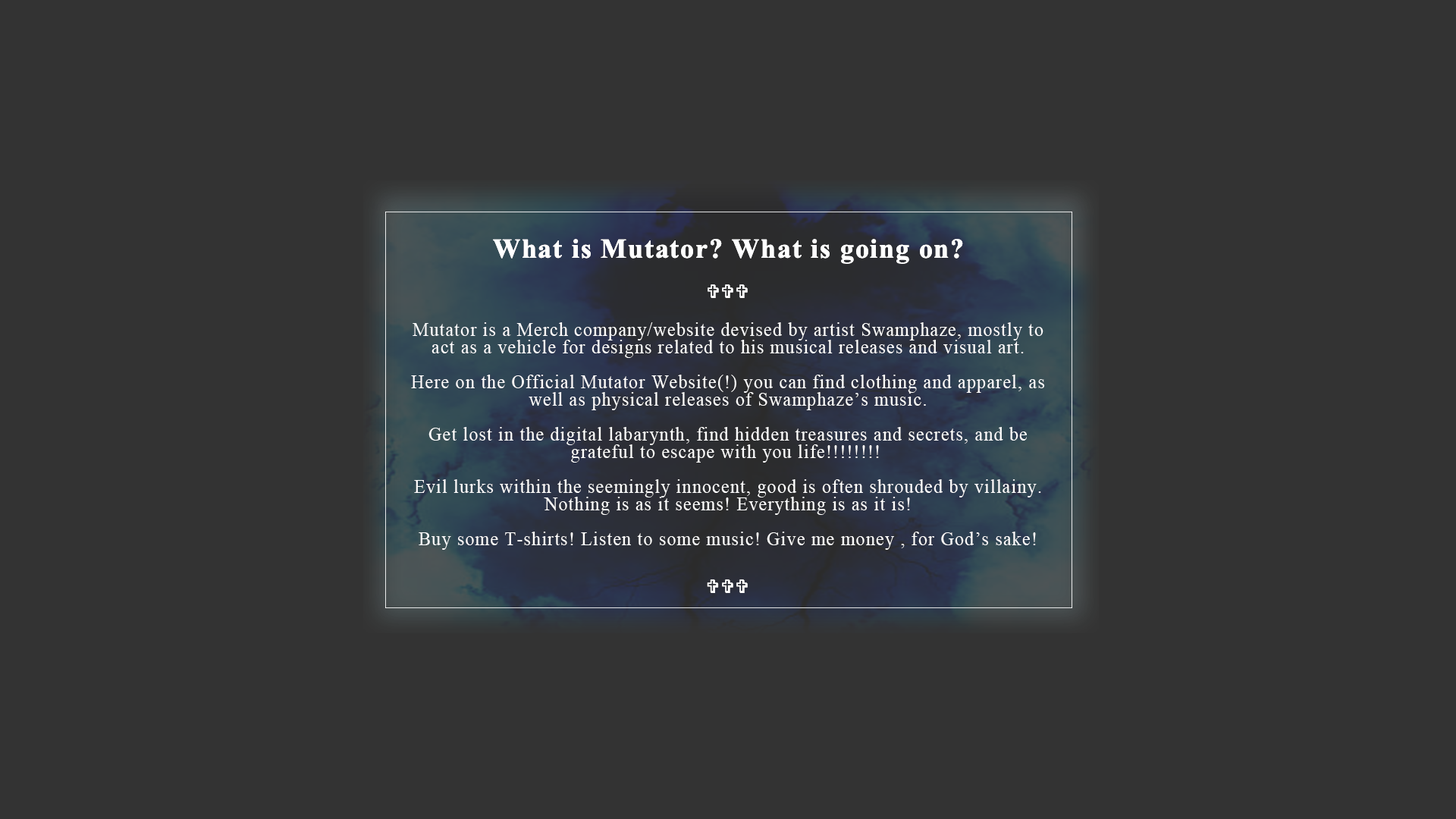
<style>
.page{position:relative;width:1456px;height:819px;background:#333333}
.page>*{position:absolute;margin:0}
.t1{font:27.3px "TimesNewRomanPS-BoldMT";letter-spacing:0.05em;color:#ffffff}
.t2{font:19.9px/17.4px "TimesNewRomanPSMT";letter-spacing:0.05em;color:#ffffff;scale:0.92 1}
</style>
<div class="page">
<p class="t1" style="left:493px;top:239px;width:470px;height:25px">What is Mutator? What is going on?</p>
<p class="t2" style="left:411px;top:322px;width:634px;height:228px;text-align:center">Mutator is a Merch company/website devised by artist Swamphaze, mostly to<br>act as a vehicle for designs related to his musical releases and visual art.<br><br>Here on the Official Mutator Website(!) you can find clothing and apparel, as<br>well as physical releases of Swamphaze’s music.<br><br>Get lost in the digital labarynth, find hidden treasures and secrets, and be<br>grateful to escape with you life!!!!!!!! <br><br>Evil lurks within the seemingly innocent, good is often shrouded by villainy.<br>Nothing is as it seems! Everything is as it is!<br><br>Buy some T-shirts! Listen to some music! Give me money , for God’s sake!</p>
</div>
